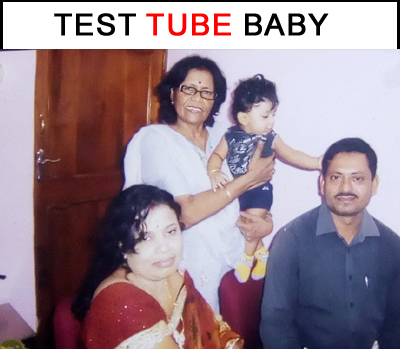
<style>
.page{position:relative;width:400px;height:349px}
.page>*{position:absolute;margin:0}
.t1{font:30px "ArialMT";color:#000000;text-transform:uppercase;font-weight:bold}
.t2{font:30px "ArialMT";color:#ff0000;text-transform:uppercase;font-weight:bold}
</style>
<div class="page">
<p class="t1" style="left:54px;top:13px;width:275px;height:23px">Test<span class="t2"> Tube </span>Baby</p>
</div>
